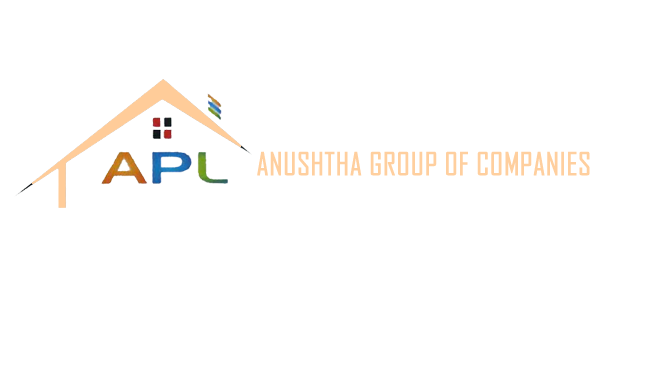
<style>
.page{position:relative;width:661px;height:387px;background:#ffffff}
.page>*{position:absolute;margin:0}
.t1{font:30px "AgencyFB-Reg";color:#ffcc99;text-transform:uppercase;font-weight:bold}
</style>
<div class="page">
<p class="t1" style="left:257px;top:151px;width:333px;height:25px">aNUSHTHA GROUP OF COMPANIES</p>
</div>
